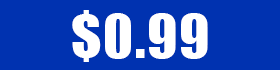
<style>
.page{position:relative;width:280px;height:70px;background:#0032b0}
.page>*{position:absolute;margin:0}
.t1{font:55.6px "Impact";letter-spacing:0.03em;color:#ffffff;text-transform:uppercase}
</style>
<div class="page">
<p class="t1" style="left:72px;top:10px;width:136px;height:52px">$0.99</p>
</div>
